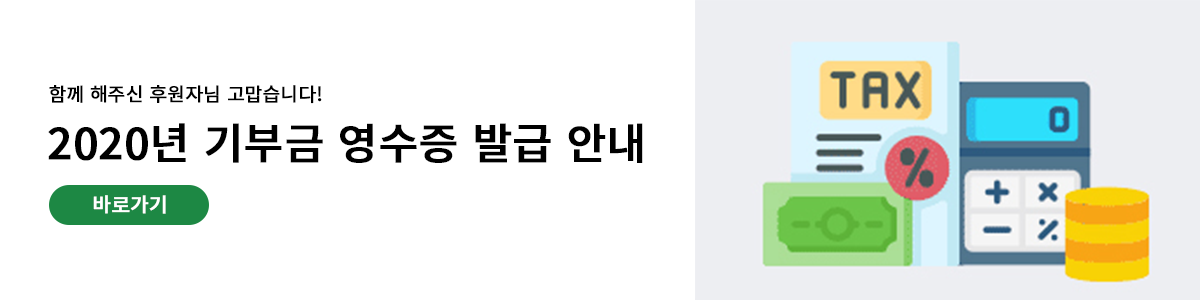
<style>
.page{position:relative;width:1200px;height:300px;background:#ffffff}
.page>*{position:absolute;margin:0}
.t1{font:19px "NotoSansKR-Regular";letter-spacing:-0.005em;color:#000000;font-weight:bold}
.t2{font:43px "NotoSansKR-Medium";letter-spacing:-0.005em;color:#000000;font-weight:bold}
.t3{font:20px "NotoSansKR-Medium";letter-spacing:-0.005em;font-weight:bold}
.t4{font:20px "NotoSansKR-Medium";letter-spacing:-0.005em;color:#ffffff;font-weight:bold}
</style>
<div class="page">
<p class="t1" style="left:49px;top:85px;width:273px;height:19px">함께 해주신 후원자님 고맙습니다!</p>
<p class="t2" style="left:48px;top:123px;width:595px;height:40px">2020년 기부금 영수증 발급 안내</p>
<p class="t3" style="left:92px;top:195px;width:74px;height:19px">후원하기</p>
<p class="t3" style="left:92px;top:195px;width:74px;height:19px">후원하기</p>
<p class="t4" style="left:93px;top:195px;width:73px;height:19px">바로가기</p>
</div>
